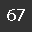
<style>
.page{position:relative;width:32px;height:32px;background:#333333}
.page>*{position:absolute;margin:0}
.t1{font:17.8px "MyriadPro-Regular";color:#ffffff;scale:1.12 1}
</style>
<div class="page">
<p class="t1" style="left:7px;top:9px;width:18px;height:12px">67=5</p>
</div>
